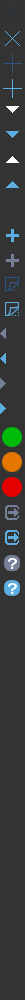
<style>
.page{position:relative;width:25px;height:1000px;background:#333333}
.page>*{position:absolute;margin:0}
.t1{font:14px "HelveticaNeue-MediumExt";color:#ffffff}
</style>
<div class="page">
<p class="t1" style="left:8px;top:558px;width:9px;height:11px">?</p>
<p class="t1" style="left:8px;top:583px;width:9px;height:11px">?</p>
</div>
